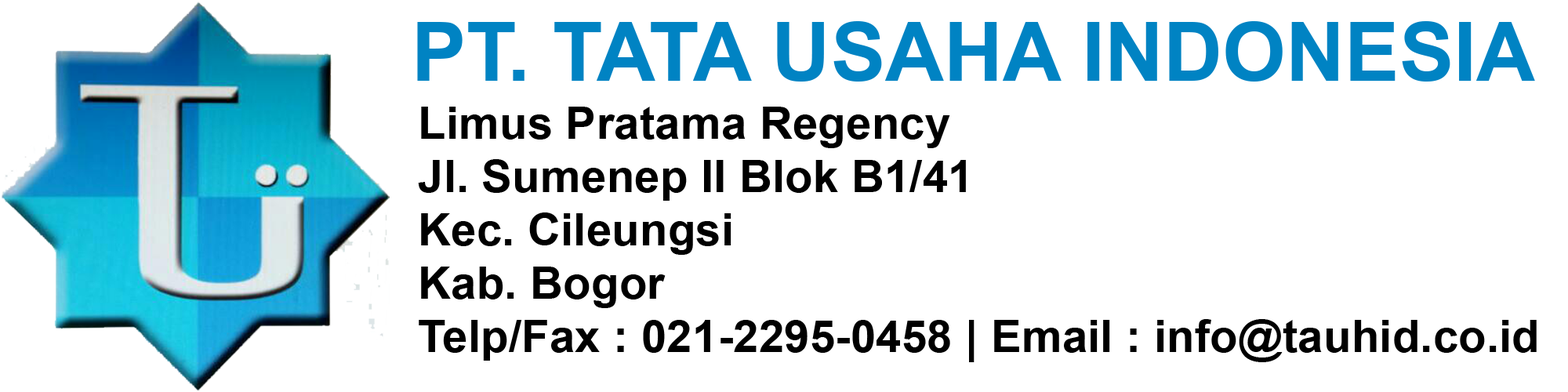
<style>
.page{position:relative;width:1568px;height:392px;background:#ffffff}
.page>*{position:absolute;margin:0}
.t1{font:81.7px "Arial-BoldMT";color:#0084c3}
.t2{font:44.3px "Arial-BoldMT";color:#000000;scale:1.04 1}
</style>
<div class="page">
<p class="t1" style="left:417px;top:21px;width:1118px;height:61px">PT. TATA USAHA INDONESIA</p>
<p class="t2" style="left:418px;top:107px;width:1119px;height:255px">Limus Pratama Regency<br>Jl. Sumenep II Blok B1/41<br>Kec. Cileungsi<br>Kab. Bogor<br>Telp/Fax : 021-2295-0458 | Email : info@tauhid.co.id</p>
</div>
